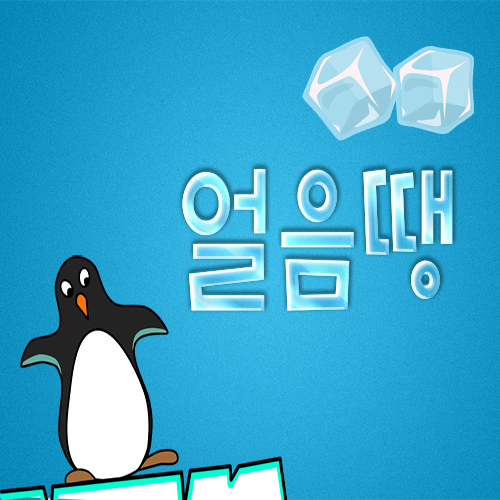
<style>
.page{position:relative;width:500px;height:500px}
.page>*{position:absolute;margin:0}
.t1{font:150px "HoonJunglebookR";scale:0.75 1}
</style>
<div class="page">
<p class="t1" style="left:182px;top:169px;width:271px;height:142px">얼음땡</p>
</div>
